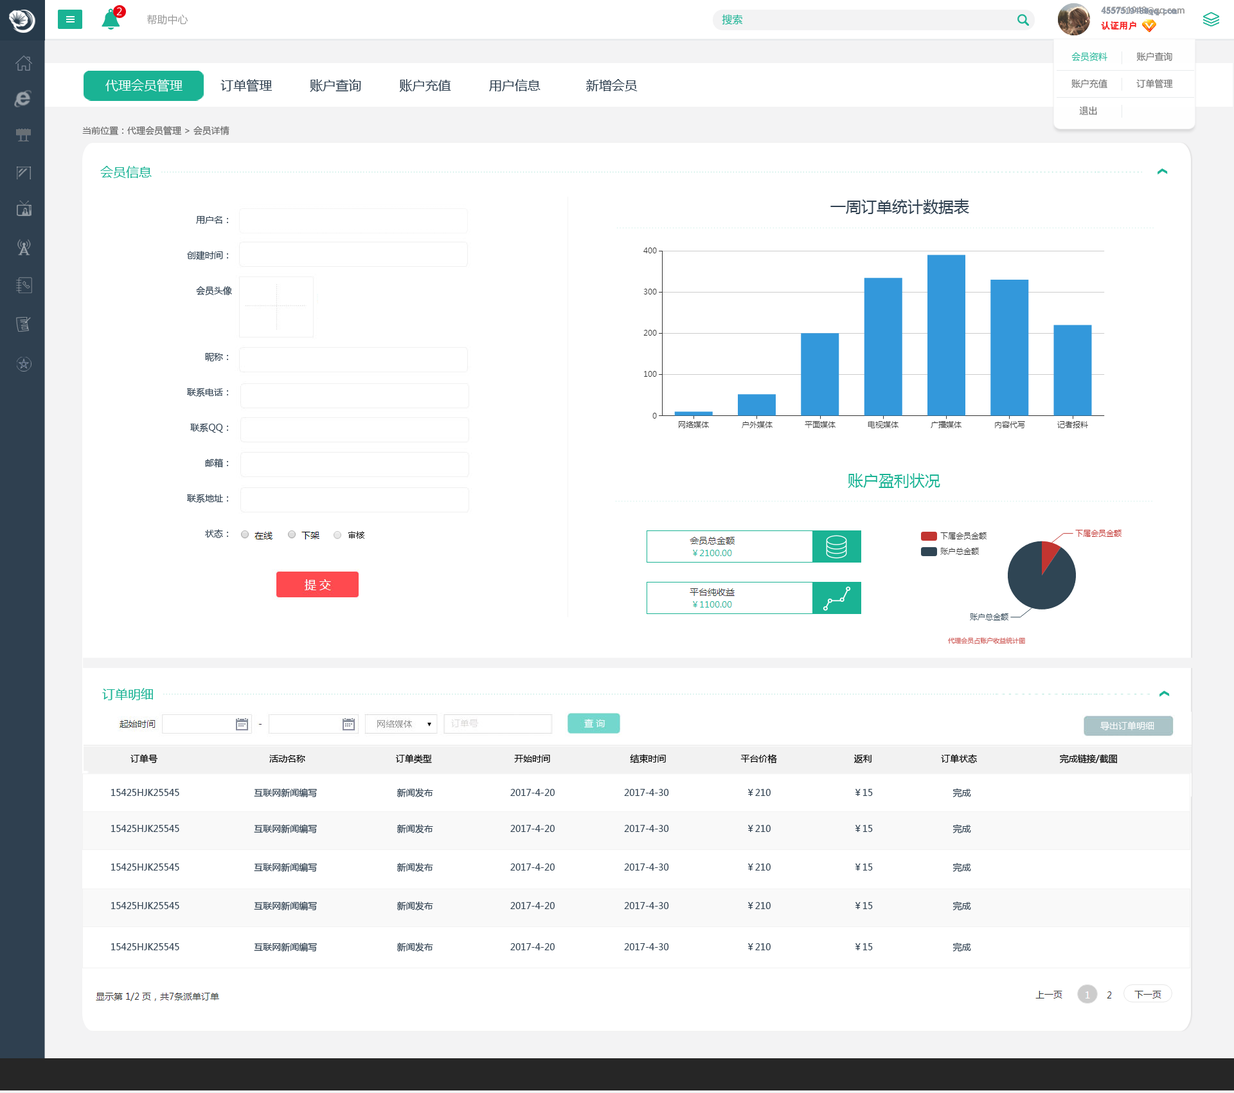
<style>
.page{position:relative;width:1234px;height:1093px;background:#ffffff}
.page>*{position:absolute;margin:0}
.t1{font:10.3px "MicrosoftYaHei";color:#ffffff}
.t2{font:10.3px "MicrosoftYaHei";color:#999999}
.t3{font:10.3px "MicrosoftYaHei";color:#1ab394}
.t4{font:9px/15.4px "AdobeHeitiStd-Regular";color:#999999}
.t5{font:9px/15.4px "AdobeHeitiStd-Regular";color:#f61e1e}
.t6{font:9px/15.4px "AdobeHeitiStd-Regular";color:#ffffff}
.t7{font:9px/15.4px "SimSun";color:#8894a4;font-weight:bold}
.t8{font:9px/15.4px "SimSun";color:#f61e1e}
.t9{font:9px/27px "MicrosoftYaHei";color:#666666}
.t10{font:9px/27px "MicrosoftYaHei";color:#1ab394}
.t11{font:12.9px "MicrosoftYaHei";color:#2f4050}
.t12{font:12.9px "MicrosoftYaHei";color:#ffffff}
.t13{font:9px "MicrosoftYaHei";color:#666666}
.t14{font:12.9px "MicrosoftYaHei";color:#1ab394}
.t15{font:15.4px "MicrosoftYaHei";color:#2f4050}
.t16{font:9px/35.4px "MicrosoftYaHei";color:#2f4050}
.t17{font:15.4px "MicrosoftYaHei";color:#1ab394}
.t18{font:8.4px "MicrosoftYaHei";color:#262626}
.t19{font:6.4px "MicrosoftYaHei";color:#cf615e}
.t20{font:9px "MicrosoftYaHei";color:#ffffff}
.t21{font:9px "MicrosoftYaHei";color:#000000}
.t22{font:9px "MicrosoftYaHei";color:#2f4050}
</style>
<div class="page">
<p class="t1" style="left:116px;top:7px;width:6px;height:8px">2</p>
<p class="t2" style="left:147px;top:14px;width:41px;height:11px">帮助中心</p>
<p class="t3" style="left:722px;top:14px;width:21px;height:11px">搜索</p>
<p class="t4" style="left:1101px;top:6px;width:84px;height:24px">455751948@qq.com<br><span class="t5">认证用户               </span><span class="t6">退出</span></p>
<p class="t7" style="left:1101px;top:7px;width:77px;height:23px">455751948@qq.com<br><span class="t8">认证用户</span></p>
<p class="t9" style="left:1072px;top:52px;width:101px;height:63px"><span class="t10">会员资料</span>           账户查询<br>账户充值           订单管理           <br>   退出</p>
<p class="t11" style="left:105px;top:79px;width:533px;height:13px"><span class="t12">代理会员管理   </span>       订单管理          账户查询          账户充值          用户信息            新增会员</p>
<p class="t13" style="left:82px;top:126px;width:148px;height:10px">当前位置：代理会员管理 &gt; 会员详情</p>
<p class="t14" style="left:100px;top:166px;width:52px;height:12px">会员信息</p>
<p class="t15" style="left:831px;top:199px;width:138px;height:15px">一周订单统计数据表</p>
<p class="t16" style="left:187px;top:216px;width:45px;height:322px;text-align:right">用户名：<br>创建时间：<br>会员头像<br><br><br>昵称：<br>联系电话：<br>联系QQ：<br>邮箱：<br>联系地址：<br>状态：</p>
<p class="t17" style="left:848px;top:473px;width:93px;height:15px">账户盈利状况</p>
<p class="t18" style="left:348px;top:531px;width:16px;height:8px">审核</p>
<p class="t19" style="left:948px;top:637px;width:77px;height:7px">代理会员占账户收益统计图</p>
<p class="t14" style="left:102px;top:688px;width:51px;height:12px">订单明细</p>
<p class="t20" style="left:1101px;top:721px;width:54px;height:9px">导出订单明细</p>
<p class="t21" style="left:130px;top:754px;width:987px;height:10px">订单号                                          活动名称                                  订单类型                               开始时间                              结束时间                            平台价格                             返利                          订单状态                               完成链接/截图</p>
<p class="t22" style="left:111px;top:788px;width:860px;height:9px">15425HJK25545                            互联网新闻编写                              新闻发布                             2017-4-20                          2017-4-30                             ￥210                               ￥15                              完成</p>
<p class="t22" style="left:111px;top:824px;width:860px;height:9px">15425HJK25545                            互联网新闻编写                              新闻发布                             2017-4-20                          2017-4-30                             ￥210                               ￥15                              完成</p>
<p class="t22" style="left:111px;top:863px;width:860px;height:9px">15425HJK25545                            互联网新闻编写                              新闻发布                             2017-4-20                          2017-4-30                             ￥210                               ￥15                              完成</p>
<p class="t22" style="left:111px;top:901px;width:860px;height:9px">15425HJK25545                            互联网新闻编写                              新闻发布                             2017-4-20                          2017-4-30                             ￥210                               ￥15                              完成</p>
<p class="t22" style="left:111px;top:942px;width:860px;height:9px">15425HJK25545                            互联网新闻编写                              新闻发布                             2017-4-20                          2017-4-30                             ￥210                               ￥15                              完成</p>
</div>
